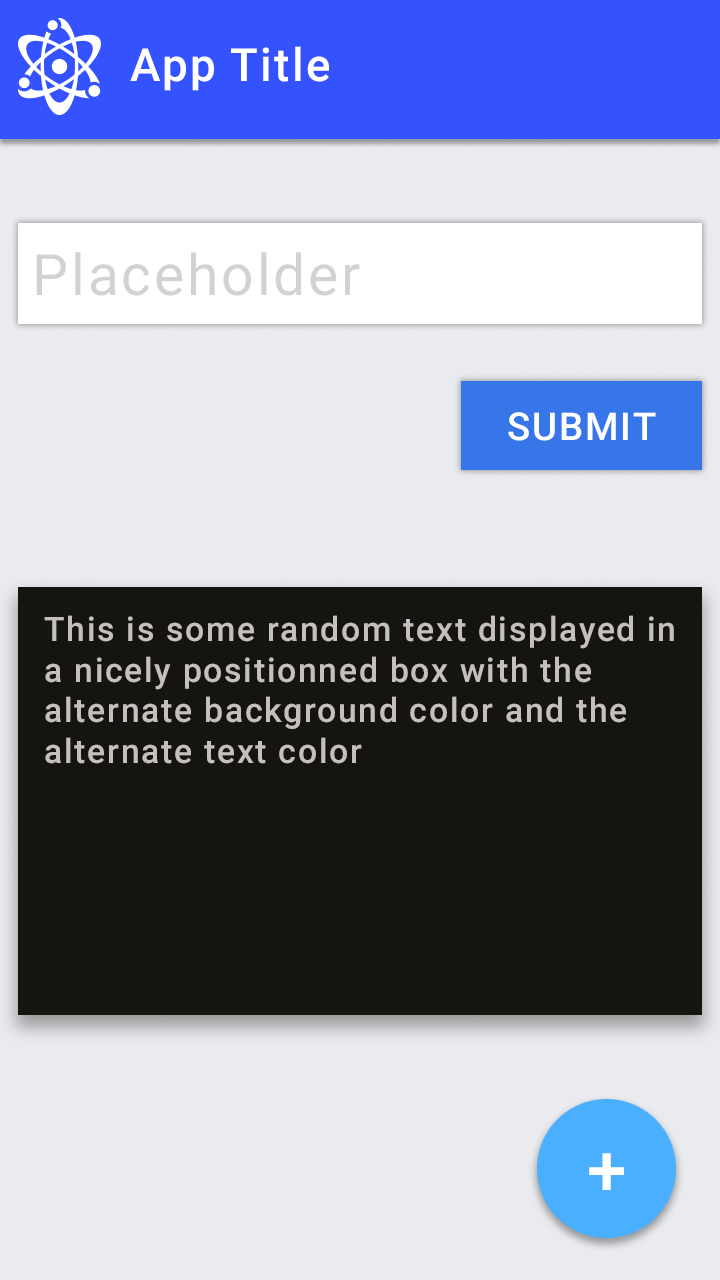
<style>
.page{position:relative;width:720px;height:1280px;background:#e9ebee}
.page>*{position:absolute;margin:0}
.t1{font:45.9px "Roboto-Medium";letter-spacing:0.05em;color:#ffffff}
.t2{font:56.9px "Roboto-Regular";letter-spacing:0.05em;color:#d1d2d2}
.t3{font:38.4px "Roboto-Medium";letter-spacing:0.05em;color:#ffffff}
.t4{font:33.8px "Roboto-Medium";letter-spacing:0.05em;color:#c3c0be}
.t5{font:71.1px "Roboto-Medium";letter-spacing:0.05em;color:#ffffff}
</style>
<div class="page">
<p class="t1" style="left:130px;top:46px;width:199px;height:45px">App Title</p>
<p class="t2" style="left:36px;top:252px;width:324px;height:44px">Placeholder</p>
<p class="t3" style="left:508px;top:412px;width:148px;height:29px">SUBMIT</p>
<p class="t4" style="left:44px;top:615px;width:630px;height:149px">This is some random text displayed in<br>a nicely positionned box with the<br>alternate background color and the<br>alternate text color</p>
<p class="t5" style="left:589px;top:1153px;width:35px;height:37px">+</p>
</div>
